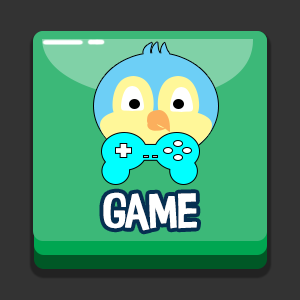
<style>
.page{position:relative;width:300px;height:300px;background:#333333}
.page>*{position:absolute;margin:0}
.t1{font:50px "InsideOut";color:#ffffff}
</style>
<div class="page">
<p class="t1" style="left:103px;top:192px;width:94px;height:39px">game</p>
</div>
